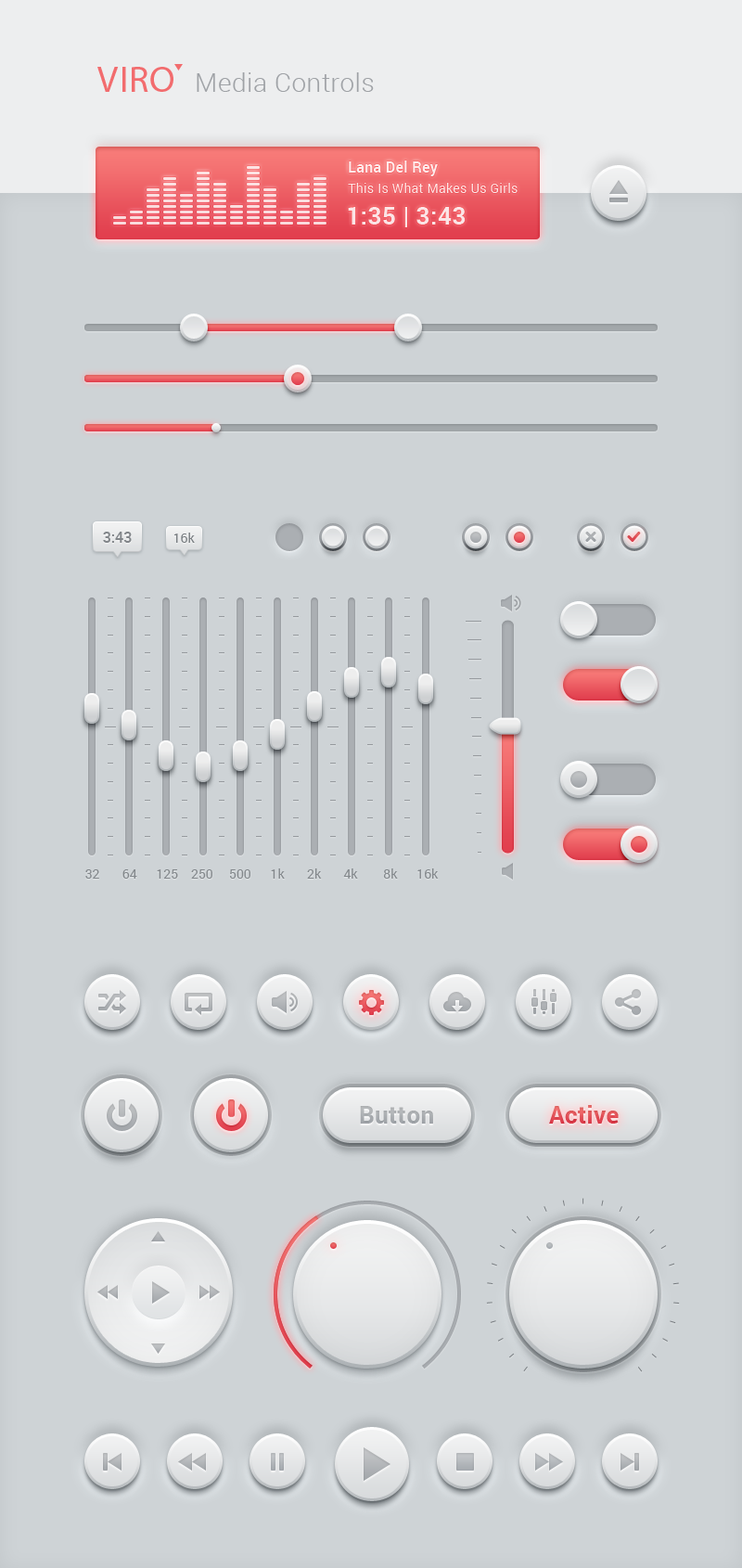
<style>
.page{position:relative;width:742px;height:1568px;background:#ced3d6}
.page>*{position:absolute;margin:0}
.t1{font:37.1px "MyriadPro-Regular";letter-spacing:0.02em;color:#f26c6e}
.t2{font:26px "Roboto-Light";letter-spacing:0.02em;color:#9fa2a6}
.t3{font:14.8px "Roboto-Bold";letter-spacing:0.02em;color:#ffffff}
.t4{font:13px "Roboto-Regular";letter-spacing:0.02em;color:#ffffff}
.t5{font:24.1px "Roboto-Bold";letter-spacing:0.02em;color:#fbe4e6}
.t6{font:14.8px "Roboto-Medium";color:#82868a}
.t7{font:13px "Roboto-Regular";color:#797e82}
.t8{font:13px "Roboto-Regular";color:#83888c}
.t9{font:24.1px "Roboto-Bold";letter-spacing:0.02em;color:#a8abaf}
.t10{font:24.1px "Roboto-Bold";letter-spacing:0.02em;color:#e04e55}
</style>
<div class="page">
<p class="t1" style="left:97px;top:67px;width:77px;height:25px">VIRO</p>
<p class="t2" style="left:197px;top:72px;width:177px;height:20px">Media Controls</p>
<p class="t3" style="left:349px;top:161px;width:89px;height:15px">Lana Del Rey</p>
<p class="t4" style="left:348px;top:183px;width:170px;height:10px">This Is What Makes Us Girls</p>
<p class="t5" style="left:348px;top:207px;width:118px;height:20px">1:35 | 3:43</p>
<p class="t6" style="left:103px;top:532px;width:29px;height:11px">3:43</p>
<p class="t7" style="left:174px;top:533px;width:21px;height:10px">16k</p>
<p class="t8" style="left:85px;top:868px;width:354px;height:11px">32       64      125    250     500      1k       2k       4k        8k      16k</p>
<p class="t9" style="left:360px;top:1106px;width:73px;height:18px">Button</p>
<p class="t10" style="left:549px;top:1105px;width:70px;height:19px">Active</p>
</div>
